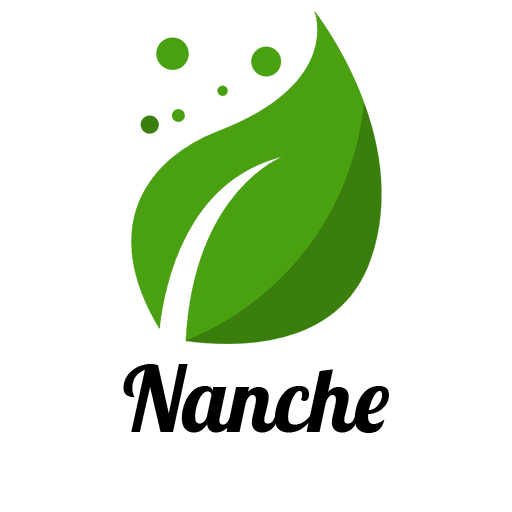
<style>
.page{position:relative;width:512px;height:512px;background:#ffffff}
.page>*{position:absolute;margin:0}
.t1{font:90px "Lobster-Regular";color:#000000}
</style>
<div class="page">
<p class="t1" style="left:123px;top:364px;width:266px;height:69px">Nanche</p>
</div>
